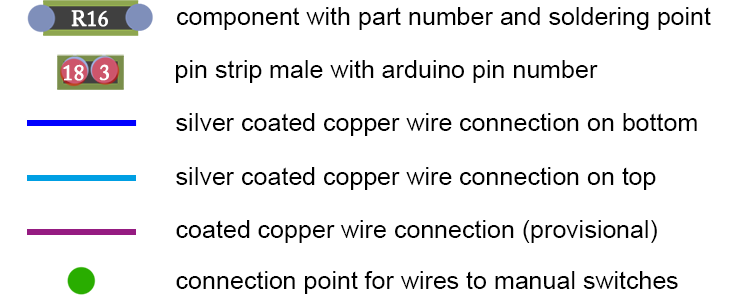
<style>
.page{position:relative;width:737px;height:303px;background:#ffffff}
.page>*{position:absolute;margin:0}
.t1{font:21.4px "ACaslonPro-Regular";color:#ffffff;font-weight:bold}
.t2{font:25px "ArialMT";color:#000000}
</style>
<div class="page">
<p class="t1" style="left:71px;top:10px;width:37px;height:17px">R16</p>
<p class="t2" style="left:177px;top:7px;width:534px;height:23px">component with part number and soldering point</p>
<p class="t1" style="left:63px;top:64px;width:21px;height:17px">18</p>
<p class="t1" style="left:99px;top:64px;width:10px;height:17px">3</p>
<p class="t2" style="left:176px;top:60px;width:422px;height:23px">pin strip male with arduino pin number</p>
<p class="t2" style="left:176px;top:113px;width:521px;height:23px">silver coated copper wire connection on bottom</p>
<p class="t2" style="left:176px;top:167px;width:480px;height:23px">silver coated copper wire connection on top</p>
<p class="t2" style="left:176px;top:220px;width:481px;height:23px">coated copper wire connection (provisional)</p>
<p class="t2" style="left:176px;top:271px;width:502px;height:23px">connection point for wires to manual switches</p>
</div>
